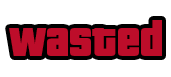
<style>
.page{position:relative;width:171px;height:77px;background:#ffffff}
.page>*{position:absolute;margin:0}
.t1{font:44.6px "PricedownBl-Regular";color:#bd0d2a}
</style>
<div class="page">
<p class="t1" style="left:9px;top:20px;width:153px;height:36px">wasted</p>
</div>
